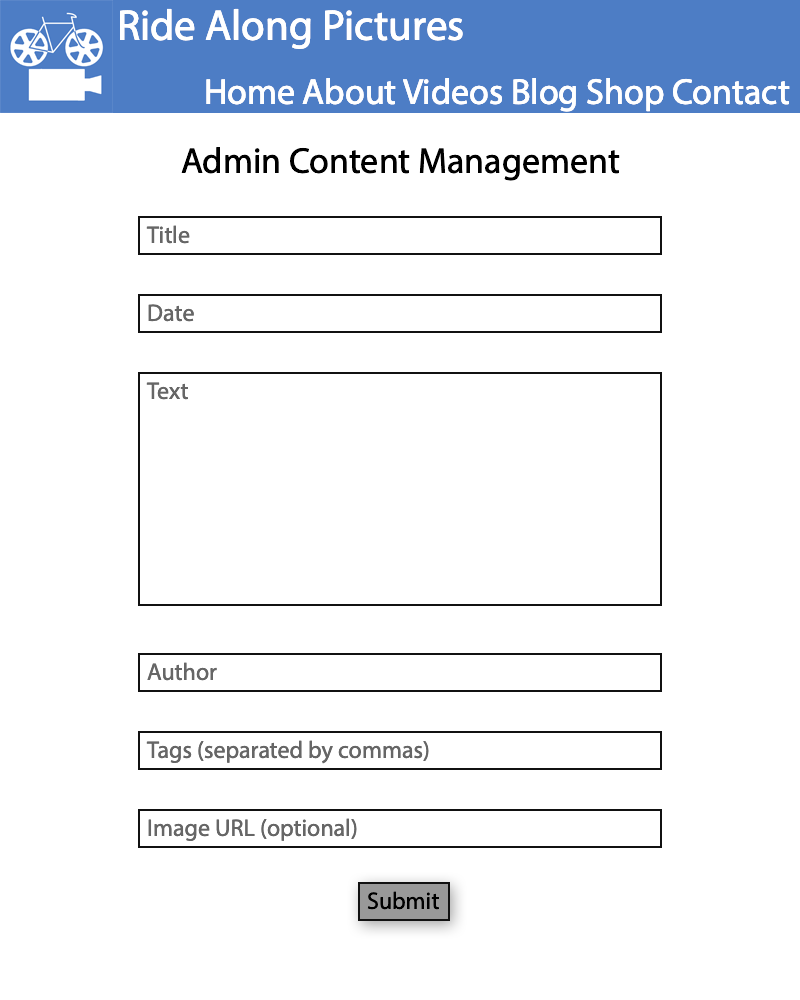
<style>
.page{position:relative;width:800px;height:1000px;background:#ffffff}
.page>*{position:absolute;margin:0}
.t1{font:43px "MyriadPro-Regular";color:#ffffff}
.t2{font:36px "MyriadPro-Regular";color:#ffffff}
.t3{font:36px "MyriadPro-Regular";color:#000000}
.t4{font:24px "MyriadPro-Regular";color:#666666}
.t5{font:24px "MyriadPro-Regular";color:#000000}
</style>
<div class="page">
<p class="t1" style="left:120px;top:8px;width:343px;height:41px">Ride Along Pictures</p>
<p class="t2" style="left:206px;top:78px;width:584px;height:34px">Home About Videos Blog Shop Contact</p>
<p class="t3" style="left:181px;top:147px;width:439px;height:34px">Admin Content Management</p>
<p class="t4" style="left:146px;top:225px;width:44px;height:19px">Title</p>
<p class="t4" style="left:148px;top:304px;width:46px;height:18px">Date</p>
<p class="t4" style="left:146px;top:382px;width:42px;height:18px">Text</p>
<p class="t4" style="left:147px;top:662px;width:70px;height:19px">Author</p>
<p class="t4" style="left:146px;top:740px;width:283px;height:24px">Tags (separated by commas)</p>
<p class="t4" style="left:148px;top:818px;width:209px;height:23px">Image URL (optional)</p>
<p class="t5" style="left:367px;top:891px;width:72px;height:19px">Submit</p>
</div>
